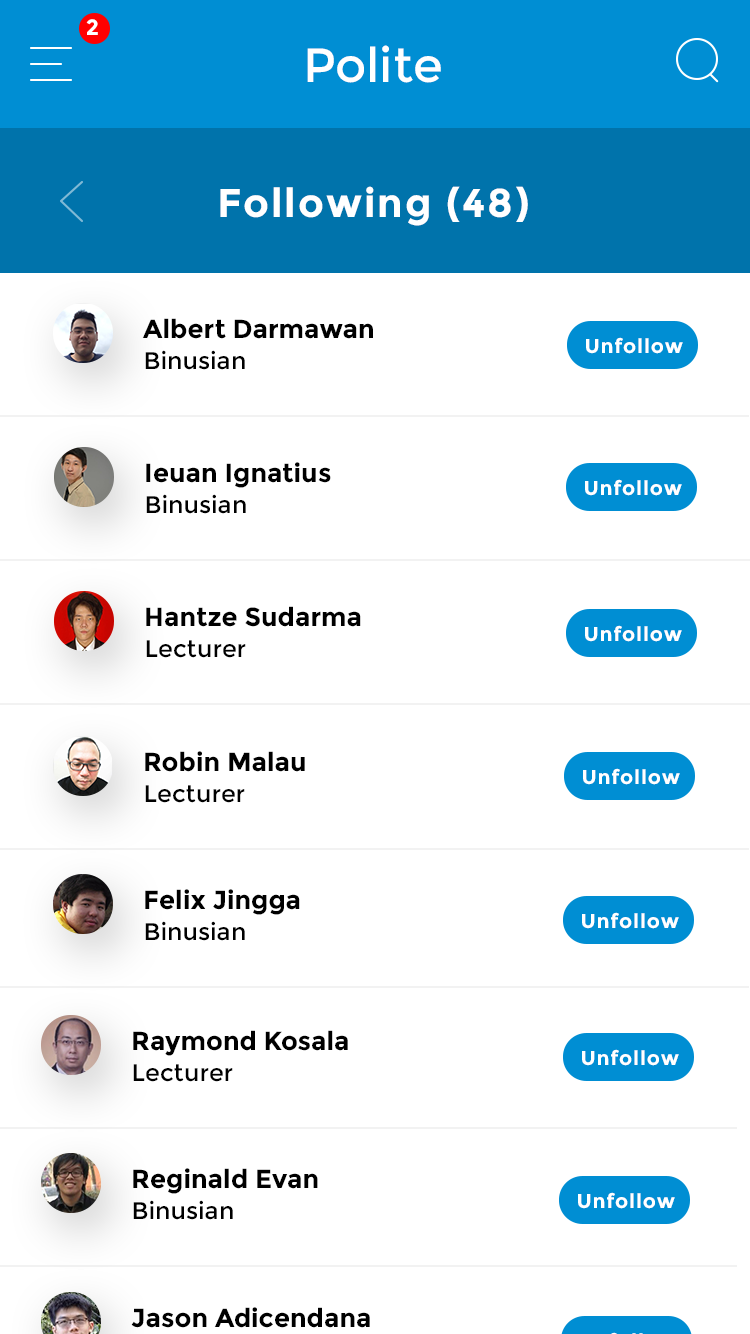
<style>
.page{position:relative;width:750px;height:1334px;background:#ffffff}
.page>*{position:absolute;margin:0}
.t1{font:22px "Montserrat-Bold";letter-spacing:0.05em;color:#ffffff}
.t2{font:48px "Montserrat-Regular";color:#ffffff}
.t3{font:40px "Montserrat-Bold";letter-spacing:0.05em;color:#ffffff}
.t4{font:26px "Montserrat-Bold";color:#000000}
.t5{font:20px "Montserrat-Bold";letter-spacing:0.05em;color:#ffffff}
.t6{font:12px "Montserrat-Regular";color:#000000}
</style>
<div class="page">
<p class="t1" style="left:86px;top:19px;width:12px;height:16px">2</p>
<p class="t2" style="left:307px;top:45px;width:134px;height:38px">Polite</p>
<p class="t3" style="left:220px;top:186px;width:308px;height:40px">Following (48)</p>
<p class="t4" style="left:142px;top:318px;width:231px;height:21px">Albert Darmawan</p>
<p class="t5" style="left:586px;top:337px;width:97px;height:17px">Unfollow</p>
<p class="t6" style="left:145px;top:350px;width:100px;height:20px">Binusian</p>
<p class="t4" style="left:146px;top:462px;width:185px;height:26px">Ieuan Ignatius</p>
<p class="t5" style="left:585px;top:479px;width:97px;height:17px">Unfollow</p>
<p class="t6" style="left:146px;top:494px;width:100px;height:20px">Binusian</p>
<p class="t4" style="left:146px;top:606px;width:215px;height:21px">Hantze Sudarma</p>
<p class="t5" style="left:585px;top:625px;width:97px;height:17px">Unfollow</p>
<p class="t6" style="left:146px;top:640px;width:100px;height:18px">Lecturer</p>
<p class="t4" style="left:145px;top:751px;width:160px;height:21px">Robin Malau</p>
<p class="t5" style="left:583px;top:768px;width:97px;height:17px">Unfollow</p>
<p class="t6" style="left:145px;top:785px;width:100px;height:18px">Lecturer</p>
<p class="t4" style="left:145px;top:889px;width:155px;height:26px">Felix Jingga</p>
<p class="t5" style="left:582px;top:912px;width:97px;height:17px">Unfollow</p>
<p class="t6" style="left:145px;top:921px;width:100px;height:20px">Binusian</p>
<p class="t4" style="left:133px;top:1030px;width:215px;height:26px">Raymond Kosala</p>
<p class="t5" style="left:582px;top:1049px;width:97px;height:17px">Unfollow</p>
<p class="t6" style="left:133px;top:1064px;width:100px;height:18px">Lecturer</p>
<p class="t4" style="left:133px;top:1168px;width:185px;height:26px">Reginald Evan</p>
<p class="t5" style="left:578px;top:1192px;width:97px;height:17px">Unfollow</p>
<p class="t6" style="left:133px;top:1200px;width:100px;height:20px">Binusian</p>
<p class="t4" style="left:131px;top:1307px;width:239px;height:21px">Jason Adicendana</p>
</div>
